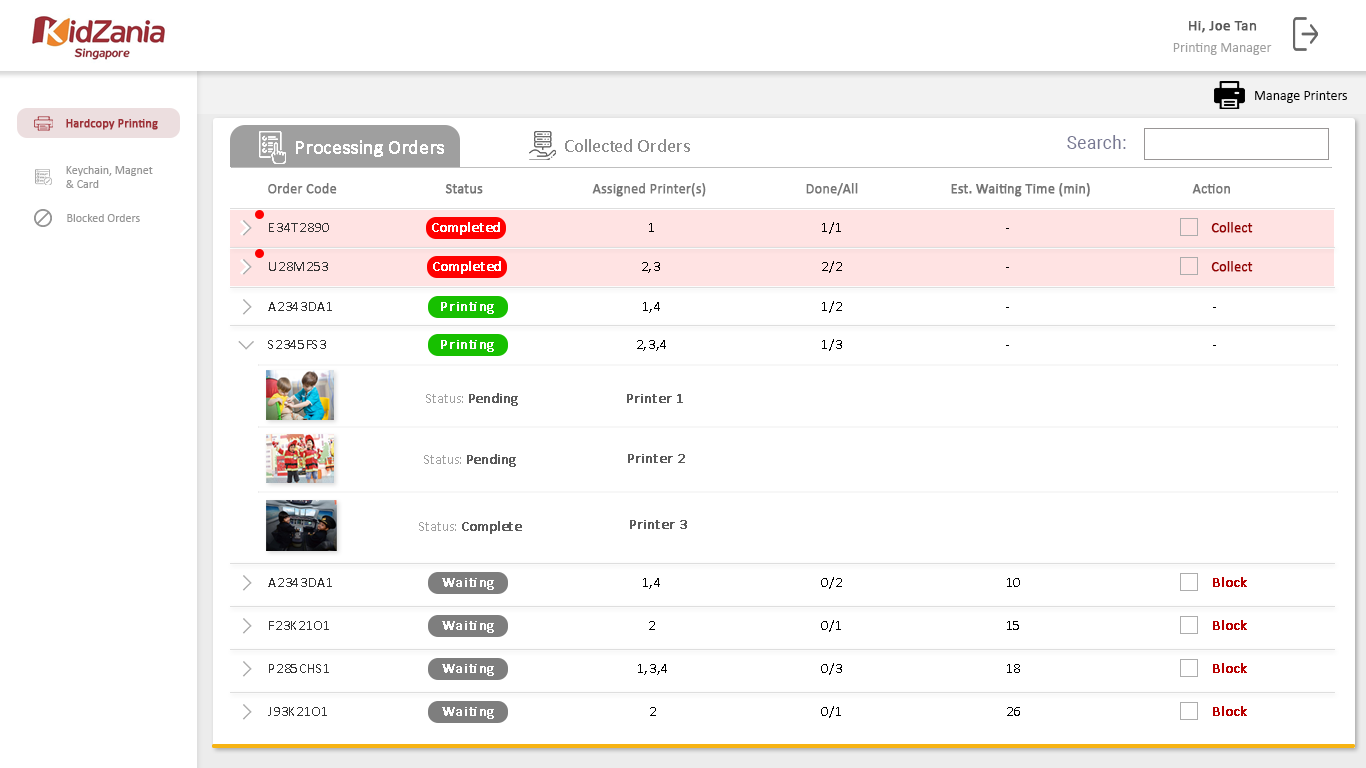
<style>
.page{position:relative;width:1366px;height:768px;background:#ffffff}
.page>*{position:absolute;margin:0}
.t1{font:15px "Calibri";color:#585858;font-weight:bold}
.t2{font:14px "Calibri";color:#9f9f9f}
.t3{font:14px "Calibri";color:#000000}
.t4{font:12px "Calibri";color:#9f3037;font-weight:bold}
.t5{font:17.5px "Roboto-Regular";letter-spacing:0.017em;color:#787993}
.t6{font:19px "Calibri-Light";letter-spacing:-0.01em;color:#ffffff;font-weight:bold}
.t7{font:19px "Calibri";color:#8d8d8d}
.t8{font:12px/14px "Calibri";color:#959595}
.t9{font:14px "Calibri";color:#757575;font-weight:bold}
.t10{font:12px "Calibri";color:#959595}
.t11{font:14px "Calibri";letter-spacing:-0.005em;color:#ffffff;font-weight:bold}
.t12{font:14px "Calibri";letter-spacing:0.05em;color:#000000}
.t13{font:14px "Calibri";color:#960000;font-weight:bold}
.t14{font:14px "Calibri";letter-spacing:0.05em;color:#343434}
.t15{font:14px "Calibri";letter-spacing:0.05em;color:#ffffff;font-weight:bold}
.t16{font:14px "Calibri";color:#a0a0a0}
.t17{font:14px "Calibri";color:#5a5a5a;font-weight:bold}
.t18{font:14px "Calibri";color:#b80000;font-weight:bold}
</style>
<div class="page">
<p class="t1" style="left:1189px;top:21px;width:68px;height:12px">Hi, Joe Tan</p>
<p class="t2" style="left:1173px;top:43px;width:99px;height:12px">Printing Manager</p>
<p class="t3" style="left:1255px;top:91px;width:92px;height:12px">Manage Printers</p>
<p class="t4" style="left:66px;top:119px;width:92px;height:11px">Hardcopy Printing</p>
<p class="t5" style="left:1067px;top:135px;width:59px;height:14px">Search:</p>
<p class="t6" style="left:296px;top:140px;width:148px;height:17px">Processing Orders</p>
<p class="t7" style="left:565px;top:139px;width:125px;height:13px">Collected Orders</p>
<p class="t8" style="left:66px;top:166px;width:87px;height:22px">Keychain, Magnet <br>&amp; Card</p>
<p class="t9" style="left:268px;top:183px;width:69px;height:11px">Order Code</p>
<p class="t9" style="left:445px;top:184px;width:38px;height:10px">Status</p>
<p class="t9" style="left:592px;top:183px;width:114px;height:14px">Assigned Printer(s)</p>
<p class="t9" style="left:806px;top:183px;width:52px;height:13px">Done/All</p>
<p class="t9" style="left:951px;top:183px;width:139px;height:14px">Est. Waiting Time (min)</p>
<p class="t9" style="left:1192px;top:184px;width:38px;height:10px">Action</p>
<p class="t10" style="left:67px;top:214px;width:73px;height:8px">Blocked Orders</p>
<p class="t11" style="left:432px;top:222px;width:68px;height:13px">Completed</p>
<p class="t12" style="left:822px;top:222px;width:19px;height:12px">1/1</p>
<p class="t13" style="left:1211px;top:222px;width:42px;height:11px">Collect</p>
<p class="t14" style="left:269px;top:223px;width:60px;height:9px">E34T2890</p>
<p class="t12" style="left:649px;top:223px;width:5px;height:9px">1</p>
<p class="t14" style="left:269px;top:262px;width:59px;height:9px">U28M253</p>
<p class="t11" style="left:433px;top:261px;width:68px;height:13px">Completed</p>
<p class="t12" style="left:642px;top:262px;width:18px;height:11px">2,3</p>
<p class="t12" style="left:822px;top:261px;width:20px;height:12px">2/2</p>
<p class="t13" style="left:1211px;top:261px;width:42px;height:11px">Collect</p>
<p class="t14" style="left:268px;top:302px;width:64px;height:9px">A2343DA1</p>
<p class="t15" style="left:441px;top:302px;width:53px;height:12px">Printing</p>
<p class="t12" style="left:643px;top:302px;width:17px;height:11px">1,4</p>
<p class="t12" style="left:822px;top:301px;width:20px;height:12px">1/2</p>
<p class="t14" style="left:268px;top:340px;width:58px;height:9px">S2345FS3</p>
<p class="t15" style="left:441px;top:340px;width:53px;height:12px">Printing</p>
<p class="t12" style="left:637px;top:340px;width:29px;height:11px">2,3,4</p>
<p class="t12" style="left:822px;top:339px;width:20px;height:12px">1/3</p>
<p class="t16" style="left:426px;top:393px;width:92px;height:13px">Status: <span class="t17">Pending</span></p>
<p class="t17" style="left:627px;top:394px;width:56px;height:9px"><span class="t16"> </span>Printer 1</p>
<p class="t16" style="left:424px;top:454px;width:92px;height:13px">Status: <span class="t17">Pending</span></p>
<p class="t17" style="left:628px;top:454px;width:57px;height:9px"><span class="t16"> </span>Printer 2</p>
<p class="t17" style="left:419px;top:521px;width:103px;height:13px"><span class="t16">Status: </span>Complete</p>
<p class="t17" style="left:630px;top:520px;width:57px;height:9px"><span class="t16"> </span>Printer 3</p>
<p class="t14" style="left:268px;top:578px;width:64px;height:9px">A2343DA1</p>
<p class="t15" style="left:442px;top:578px;width:52px;height:12px">Waiting</p>
<p class="t12" style="left:643px;top:578px;width:17px;height:11px">1,4</p>
<p class="t12" style="left:821px;top:577px;width:21px;height:12px">0/2</p>
<p class="t12" style="left:1007px;top:578px;width:13px;height:9px">10</p>
<p class="t18" style="left:1213px;top:577px;width:34px;height:10px">Block</p>
<p class="t14" style="left:269px;top:621px;width:60px;height:9px">F23K21O1</p>
<p class="t15" style="left:442px;top:621px;width:52px;height:12px">Waiting</p>
<p class="t12" style="left:649px;top:621px;width:6px;height:9px">2</p>
<p class="t12" style="left:821px;top:620px;width:20px;height:12px">0/1</p>
<p class="t12" style="left:1007px;top:621px;width:12px;height:9px">15</p>
<p class="t18" style="left:1213px;top:620px;width:34px;height:10px">Block</p>
<p class="t14" style="left:269px;top:664px;width:60px;height:9px">P285CHS1</p>
<p class="t15" style="left:442px;top:664px;width:52px;height:12px">Waiting</p>
<p class="t12" style="left:638px;top:664px;width:29px;height:11px">1,3,4</p>
<p class="t12" style="left:821px;top:663px;width:21px;height:12px">0/3</p>
<p class="t12" style="left:1007px;top:664px;width:13px;height:9px">18</p>
<p class="t18" style="left:1213px;top:663px;width:34px;height:10px">Block</p>
<p class="t14" style="left:268px;top:707px;width:59px;height:9px">J93K21O1</p>
<p class="t15" style="left:442px;top:707px;width:52px;height:12px">Waiting</p>
<p class="t12" style="left:650px;top:707px;width:6px;height:9px">2</p>
<p class="t12" style="left:821px;top:706px;width:20px;height:12px">0/1</p>
<p class="t12" style="left:1007px;top:707px;width:13px;height:9px">26</p>
<p class="t18" style="left:1213px;top:706px;width:34px;height:10px">Block</p>
</div>
